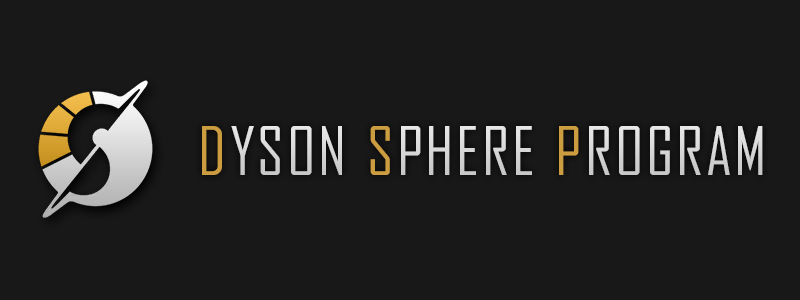
<style>
.page{position:relative;width:800px;height:300px;background:#181818}
.page>*{position:absolute;margin:0}
.t1{font:64.1px "AgencyFB-Reg";letter-spacing:0.05em;color:#cb9d40}
.t2{font:64.1px "AgencyFB-Reg";letter-spacing:0.04em;color:#d9d8d8}
.t3{font:64.1px "AgencyFB-Reg";letter-spacing:0.044em;color:#cb9d40}
.t4{font:64.1px "AgencyFB-Reg";letter-spacing:0.04em;color:#d8d7d7}
</style>
<div class="page">
<p class="t1" style="left:202px;top:126px;width:20px;height:49px">D</p>
<p class="t2" style="left:231px;top:126px;width:111px;height:49px">YSON</p>
<p class="t1" style="left:370px;top:126px;width:20px;height:49px">S</p>
<p class="t2" style="left:401px;top:126px;width:131px;height:49px">PHERE</p>
<p class="t3" style="left:559px;top:126px;width:20px;height:49px">P</p>
<p class="t4" style="left:589px;top:126px;width:174px;height:49px">ROGRAM</p>
</div>
